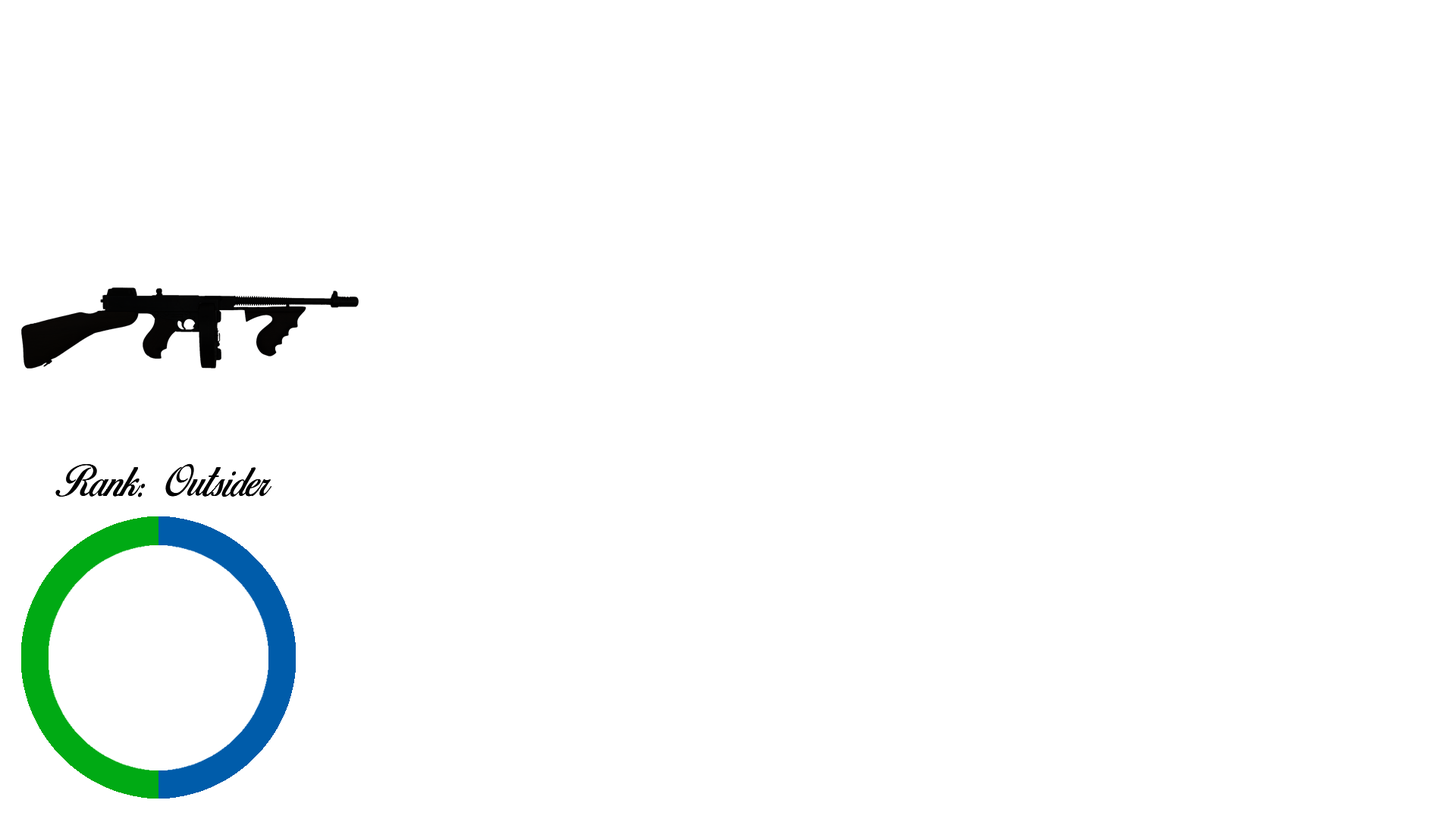
<style>
.page{position:relative;width:1456px;height:819px;background:#ffffff}
.page>*{position:absolute;margin:0}
.t1{font:37.9px "BirdsofParadise-PersonaluseOnly";color:#000000}
</style>
<div class="page">
<p class="t1" style="left:55px;top:463px;width:216px;height:34px">Rank: Outsider</p>
</div>
